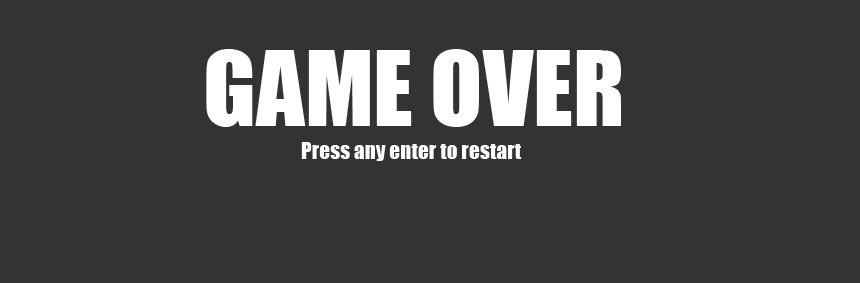
<style>
.page{position:relative;width:860px;height:283px;background:#333333}
.page>*{position:absolute;margin:0}
.t1{font:96px "Impact";color:#ffffff}
.t2{font:21.3px "Impact";color:#ffffff}
</style>
<div class="page">
<p class="t1" style="left:206px;top:49px;width:415px;height:78px">GAME OVER</p>
<p class="t2" style="left:301px;top:142px;width:221px;height:19px">Press any enter to restart</p>
</div>
